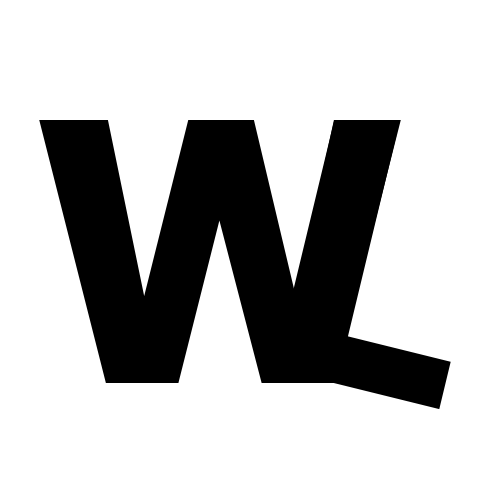
<style>
.page{position:relative;width:500px;height:500px;background:#ffffff}
.page>*{position:absolute;margin:0}
.t1{font:362.4px "Tahoma-Bold";color:#000000}
.t2{font:351.1px "Tahoma-Bold";color:#000000}
</style>
<div class="page">
<p class="t1" style="left:39px;top:120px;width:362px;height:263px">W</p>
<p class="t2" style="left:274px;top:120px;width:177px;height:290px;rotate:14deg">L</p>
</div>
